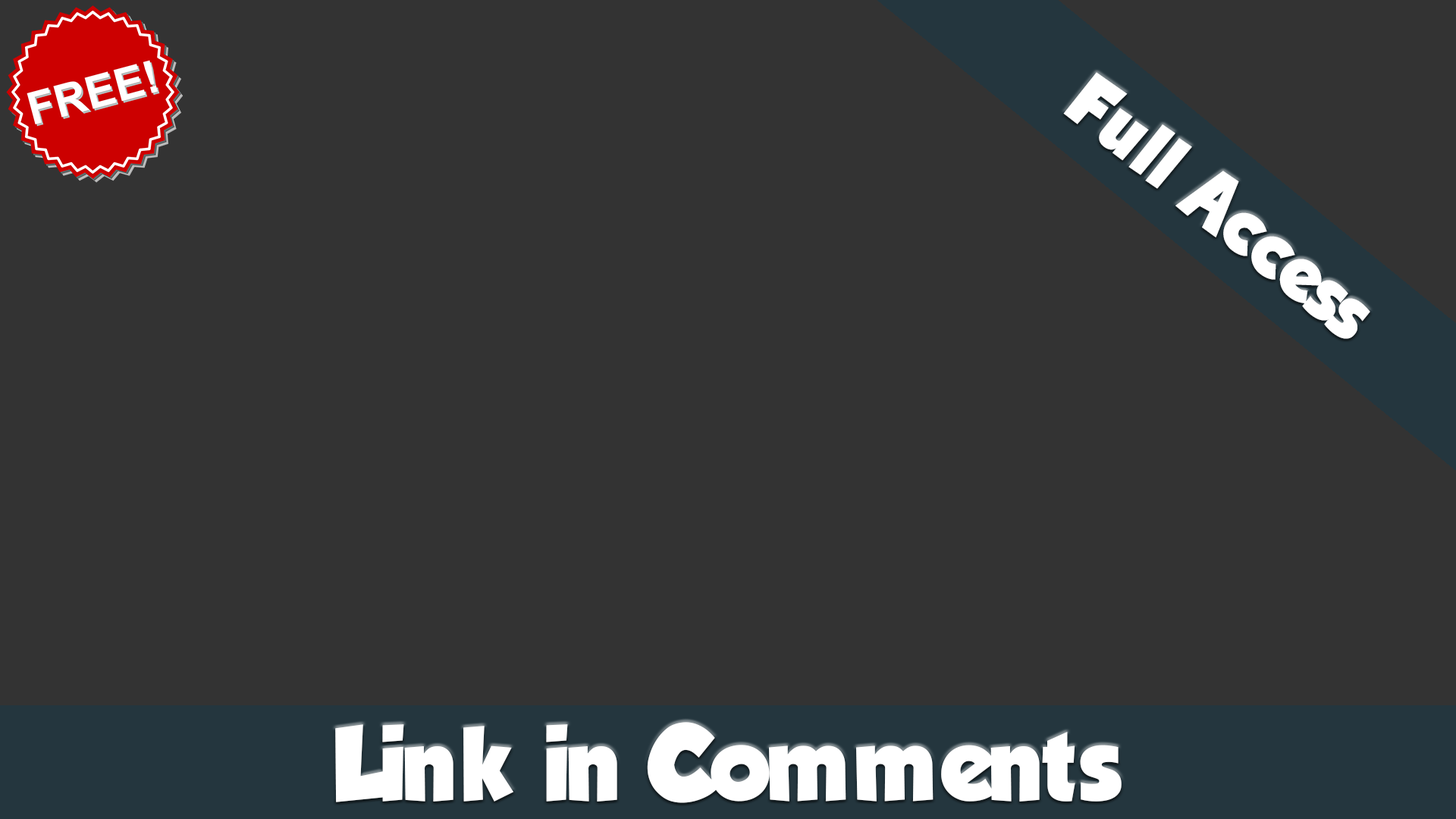
<style>
.page{position:relative;width:1456px;height:819px;background:#333333}
.page>*{position:absolute;margin:0}
.t1{font:83.4px "TadeoFont-Bold";color:#ffffff}
.t2{font:113.7px "TadeoFont-Bold";color:#ffffff}
</style>
<div class="page">
<p class="t1" style="left:1063px;top:72px;width:307px;height:267px;rotate:39deg">Full Access</p>
<p class="t2" style="left:335px;top:722px;width:787px;height:81px">Link in Comments</p>
</div>
